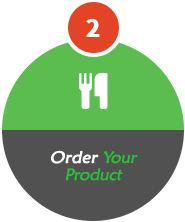
<style>
.page{position:relative;width:185px;height:222px;background:#ffffff}
.page>*{position:absolute;margin:0}
.t1{font:16.4px/8.6px "MaiandraGD-Regular";color:#25c634;font-style:italic;scale:1.05 1}
.t2{font:16.4px/5.5px "MaiandraGD-Regular";color:#fefefe;font-weight:bold;font-style:italic;scale:1.05 1}
.t3{font:16.4px/5.5px "MaiandraGD-Regular";color:#25c634;font-style:italic;scale:1.05 1}
</style>
<div class="page">
<p class="t1" style="left:51px;top:150px;width:87px;height:31px;text-align:center"><span class="t2">Order </span><span class="t3">Your</span><br><br>Product</p>
</div>
